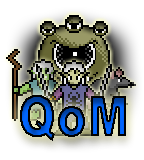
<style>
.page{position:relative;width:144px;height:160px;background:#ffffff}
.page>*{position:absolute;margin:0}
.t1{font:56px "Arial-Black";scale:0.81 1}
</style>
<div class="page">
<p class="t1" style="left:20px;top:95px;width:106px;height:46px">QoM</p>
</div>
